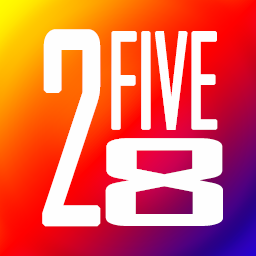
<style>
.page{position:relative;width:256px;height:256px;background:#fefefe}
.page>*{position:absolute;margin:0}
.t1{font:250px "AgencyFB-Reg";color:#fefefe;font-weight:bold;scale:0.69 1}
.t2{font:125px "AgencyFB-Reg";letter-spacing:-0.04em;color:#fefefe;font-weight:bold;scale:0.72 1}
.t3{font:107.5px "AgencyFB-Reg";color:#fefefe;font-weight:bold;scale:3.35 1}
</style>
<div class="page">
<p class="t1" style="left:42px;top:29px;width:59px;height:198px">2</p>
<p class="t2" style="left:111px;top:31px;width:107px;height:99px">FIVE</p>
<p class="t3" style="left:105px;top:138px;width:118px;height:88px">8</p>
</div>
